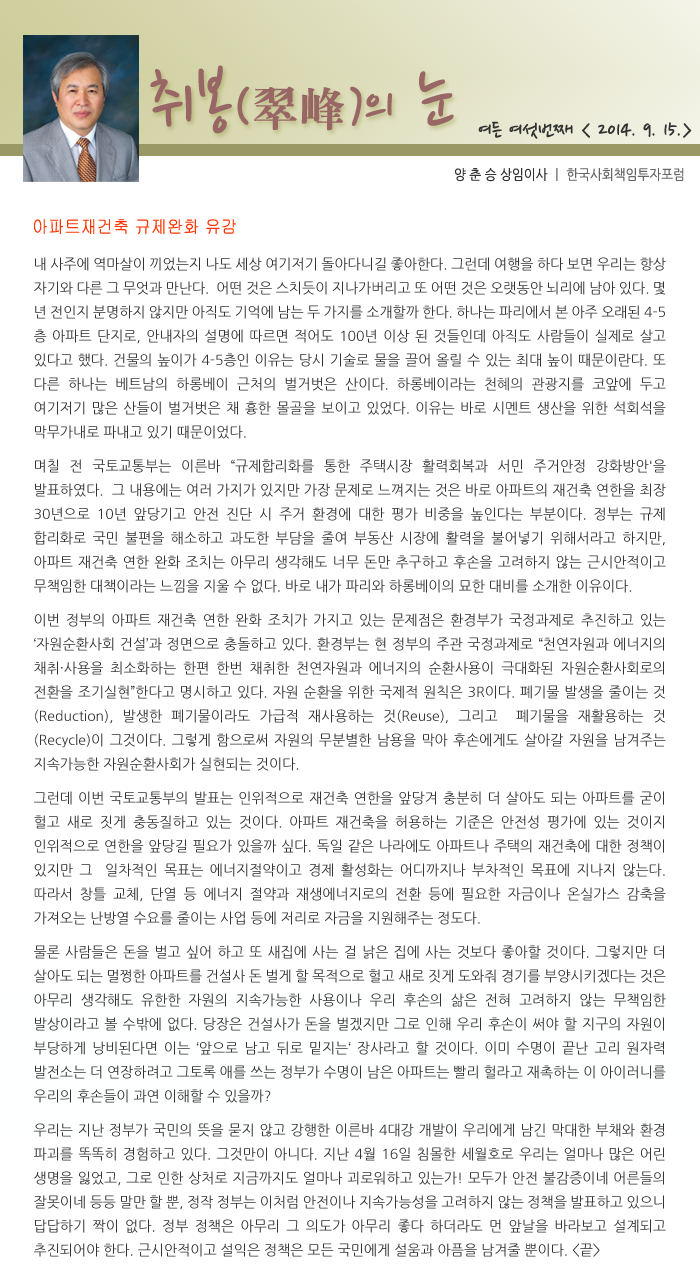
<style>
.page{position:relative;width:700px;height:1276px;background:#ffffff}
.page>*{position:absolute;margin:0}
.t1{font:77.5px "NanumPen";color:#996666}
.t2{font:60px "NanumPen";color:#996666}
.t3{font:48px "H2mjrE";color:#996666}
.t4{font:24px "NanumPen";color:#333333}
.t5{font:14px "NanumGothic";color:#666666;scale:0.9 1}
.t6{font:14px "NanumGothic";color:#333333;scale:0.9 1}
.t7{font:18px "Gulim";color:#ff3300;scale:0.9 1}
.t8{font:14px/24px "NanumGothic";color:#333333}
.t9{font:14px/10px "NanumGothic";color:#333333}
</style>
<div class="page">
<p class="t1" style="left:150px;top:65px;width:304px;height:69px">취봉<span class="t2">(</span><span class="t3">翠峰</span><span class="t2">)</span><span class="t2">의</span> 눈</p>
<p class="t4" style="left:478px;top:121px;width:214px;height:18px">여든 여섯번째 &lt; 2014. 9. 15.&gt;</p>
<p class="t5" style="left:455px;top:168px;width:229px;height:14px"><span class="t6">양 춘 승 상임이사 </span>ㅣ 한국사회책임투자포럼</p>
<p class="t7" style="left:34px;top:219px;width:202px;height:15px">아파트재건축 규제완화 유감</p>
<p class="t8" style="left:34px;top:257px;width:632px;height:1000px;text-align:justify">내 사주에 역마살이 끼었는지 나도 세상 여기저기 돌아다니길 좋아한다. 그런데 여행을 하다 보면 우리는 항상 자기와 다른 그 무엇과 만난다.  어떤 것은 스치듯이 지나가버리고 또 어떤 것은 오랫동안 뇌리에 남아 있다. 몇 년 전인지 분명하지 않지만 아직도 기억에 남는 두 가지를 소개할까 한다. 하나는 파리에서 본 아주 오래된 4-5층 아파트 단지로, 안내자의 설명에 따르면 적어도 100년 이상 된 것들인데 아직도 사람들이 실제로 살고 있다고 했다. 건물의 높이가 4-5층인 이유는 당시 기술로 물을 끌어 올릴 수 있는 최대 높이 때문이란다. 또 다른 하나는 베트남의 하롱베이 근처의 벌거벗은 산이다. 하롱베이라는 천혜의 관광지를 코앞에 두고 여기저기 많은 산들이 벌거벗은 채 흉한 몰골을 보이고 있었다. 이유는 바로 시멘트 생산을 위한 석회석을 막무가내로 파내고 <span class="t9">있기 때문이었다. <br><br>며칠 전 국토교통부는 이른바 “규</span>제합리화를 통한 주택시장 활력회복과 서민 주거안정 강화방안'을 발표하였다.  그 내용에는 여러 가지가 있지만 가장 문제로 느껴지는 것은 바로 아파트의 재건축 연한을 최장 30년으로 10년 앞당기고 안전 진단 시 주거 환경에 대한 평가 비중을 높인다는 부분이다. 정부는 규제 합리화로 국민 불편을 해소하고 과도한 부담을 줄여 부동산 시장에 활력을 불어넣기 위해서라고 하지만, 아파트 재건축 연한 완화 조치는 아무리 생각해도 너무 돈만 추구하고 후손을 고려하지 않는 근시안적이고 무책임한 대책이라는 느낌을 지울 수 없다. 바로 내가 파리와 하롱베<span class="t9">이의 묘한 대비를 소개한 이유이다.<br><br>이번 정부의 아파트 재건축 연한 완화 조치가 가지고 있는 문제점은 환경부</span>가 국정과제로 추진하고 있는 ‘자원순환사회 건설’과 정면으로 충돌하고 있다. 환경부는 현 정부의 주관 국정과제로 “천연자원과 에너지의 채취·사용을 최소화하는 한편 한번 채취한 천연자원과 에너지의 순환사용이 극대화된 자원순환사회로의 전환을 조기실현”한다고 명시하고 있다. 자원 순환을 위한 국제적 원칙은 3R이다. 폐기물 발생을 줄이는 것(Reduction), 발생한 폐기물이라도 가급적 재사용하는 것(Reuse), 그리고  폐기물을 재활용하는 것(Recycle)이 그것이다. 그렇게 함으로써 자원의 무분별한 남용을 막아 후손에게도 살아갈 자원을 남겨주는 지속가능한 자원순환사회가 실현<span class="t9">되는 것이다. <br><br>그런데 이번 국토교통부의 발표는 인위적으</span>로 재건축 연한을 앞당겨 충분히 더 살아도 되는 아파트를 굳이 헐고 새로 짓게 충동질하고 있는 것이다. 아파트 재건축을 허용하는 기준은 안전성 평가에 있는 것이지 인위적으로 연한을 앞당길 필요가 있을까 싶다. 독일 같은 나라에도 아파트나 주택의 재건축에 대한 정책이 있지만 그  일차적인 목표는 에너지절약이고 경제 활성화는 어디까지나 부차적인 목표에 지나지 않는다. 따라서 창틀 교체, 단열 등 에너지 절약과 재생에너지로의 전환 등에 필요한 자금이나 온실가스 감축을 가져오는 난방열 수요를 줄이는 사업 등<span class="t9">에 저리로 자금을 지원해주는 정도다. <br><br>물론 사람들은 돈을 벌고 싶어 하고 또 새집에 사는 걸 낡은 집에 사</span>는 것보다 좋아할 것이다. 그렇지만 더 살아도 되는 멀쩡한 아파트를 건설사 돈 벌게 할 목적으로 헐고 새로 짓게 도와줘 경기를 부양시키겠다는 것은 아무리 생각해도 유한한 자원의 지속가능한 사용이나 우리 후손의 삶은 전혀 고려하지 않는 무책임한 발상이라고 볼 수밖에 없다. 당장은 건설사가 돈을 벌겠지만 그로 인해 우리 후손이 써야 할 지구의 자원이 부당하게 낭비된다면 이는 ‘앞으로 남고 뒤로 밑지는‘ 장사라고 할 것이다. 이미 수명이 끝난 고리 원자력 발전소는 더 연장하려고 그토록 애를 쓰는 정부가 수명이 남은 아파트는 빨리 헐라고 재촉하는 이 아이러니를 우리의 후손들이 과연<span class="t9"> 이해할 수 있을까?<br><br>우리는 지난 정부가 국민의 뜻을 묻지 않고 강행한 이른바 4대강</span> 개발이 우리에게 남긴 막대한 부채와 환경 파괴를 똑똑히 경험하고 있다. 그것만이 아니다. 지난 4월 16일 침몰한 세월호로 우리는 얼마나 많은 어린 생명을 잃었고, 그로 인한 상처로 지금까지도 얼마나 괴로워하고 있는가! 모두가 안전 불감증이네 어른들의 잘못이네 등등 말만 할 뿐, 정작 정부는 이처럼 안전이나 지속가능성을 고려하지 않는 정책을 발표하고 있으니 답답하기 짝이 없다. 정부 정책은 아무리 그 의도가 아무리 좋다 하더라도 먼 앞날을 바라보고 설계되고 추진되어야 한다. 근시안적이고 설익은 정책은 모든 국민에게 설움과 아픔을 남겨줄 뿐이다. &lt;끝&gt;</p>
</div>
